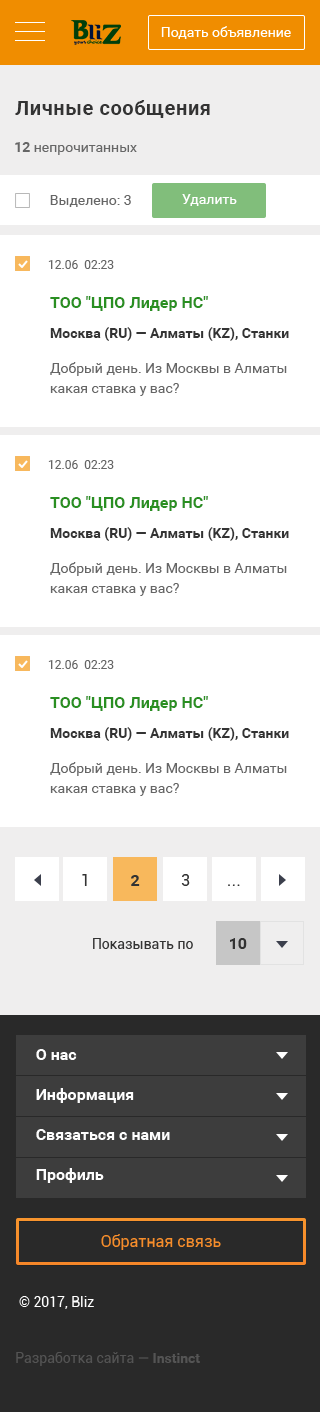
<style>
.page{position:relative;width:320px;height:1412px;background:#ffffff}
.page>*{position:absolute;margin:0}
.t1{font:20px "Roboto-Bold";letter-spacing:0.03em;color:#333333}
.t2{font:14px "Roboto-Regular";color:#666666}
.t3{font:14px "Roboto-Bold";color:#666666}
.t4{font:14px "Roboto-Regular";color:#ffffff}
.t5{font:12px "Roboto-Regular";color:#666666}
.t6{font:14px/20px "Roboto-Regular";color:#666666}
.t7{font:16px/26px "Roboto-Bold";color:#2a8f22}
.t8{font:14px/20px "Roboto-Bold";color:#333333}
</style>
<div class="page">
<p class="t1" style="left:15px;top:100px;width:195px;height:18px">Личные сообщения</p>
<p class="t2" style="left:15px;top:142px;width:122px;height:13px"><span class="t3">12 </span>непрочитанных</p>
<p class="t2" style="left:50px;top:195px;width:81px;height:12px">Выделено: 3</p>
<p class="t4" style="left:182px;top:194px;width:55px;height:12px">Удалить</p>
<p class="t5" style="left:48px;top:260px;width:66px;height:9px">12.06  02:23</p>
<p class="t6" style="left:50px;top:296px;width:239px;height:100px"><span class="t7">ТОО "ЦПО Лидер НС"<br></span><span class="t8">Москва (RU) — Алматы (KZ), Станки<br></span>Добрый день. Из Москвы в Алматы какая ставка у вас?</p>
<p class="t5" style="left:48px;top:460px;width:66px;height:9px">12.06  02:23</p>
<p class="t6" style="left:50px;top:496px;width:239px;height:100px"><span class="t7">ТОО "ЦПО Лидер НС"<br></span><span class="t8">Москва (RU) — Алматы (KZ), Станки<br></span>Добрый день. Из Москвы в Алматы какая ставка у вас?</p>
<p class="t5" style="left:48px;top:660px;width:66px;height:9px">12.06  02:23</p>
<p class="t6" style="left:50px;top:696px;width:239px;height:100px"><span class="t7">ТОО "ЦПО Лидер НС"<br></span><span class="t8">Москва (RU) — Алматы (KZ), Станки<br></span>Добрый день. Из Москвы в Алматы какая ставка у вас?</p>
</div>
